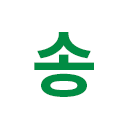
<style>
.page{position:relative;width:128px;height:128px;background:#ffffff}
.page>*{position:absolute;margin:0}
.t1{font:72px "NotoSansKR-Bold";letter-spacing:0.02em;color:#008c43}
</style>
<div class="page">
<p class="t1" style="left:34px;top:32px;width:60px;height:65px">송</p>
</div>
